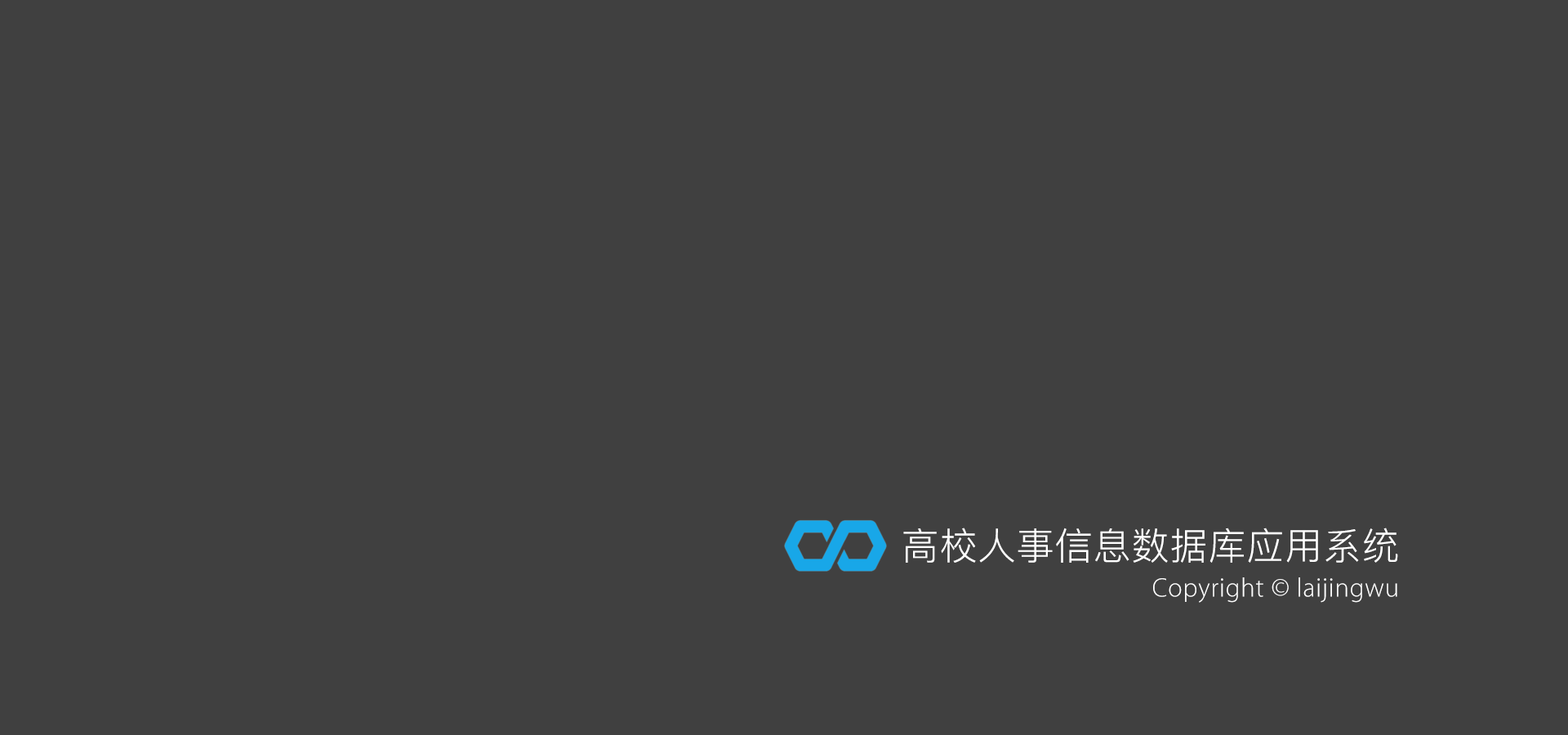
<style>
.page{position:relative;width:1568px;height:735px;background:#404040}
.page>*{position:absolute;margin:0}
.t1{font:37.4px "PingFang-SC-Regular";letter-spacing:0.025em;color:#ffffff}
.t2{font:27.2px "MyriadSetPro-Thin";letter-spacing:0.025em;color:#ffffff}
</style>
<div class="page">
<p class="t1" style="left:903px;top:528px;width:495px;height:35px">高校人事信息数据库应用系统</p>
<p class="t2" style="left:1153px;top:577px;width:244px;height:26px">Copyright © laijingwu</p>
</div>
